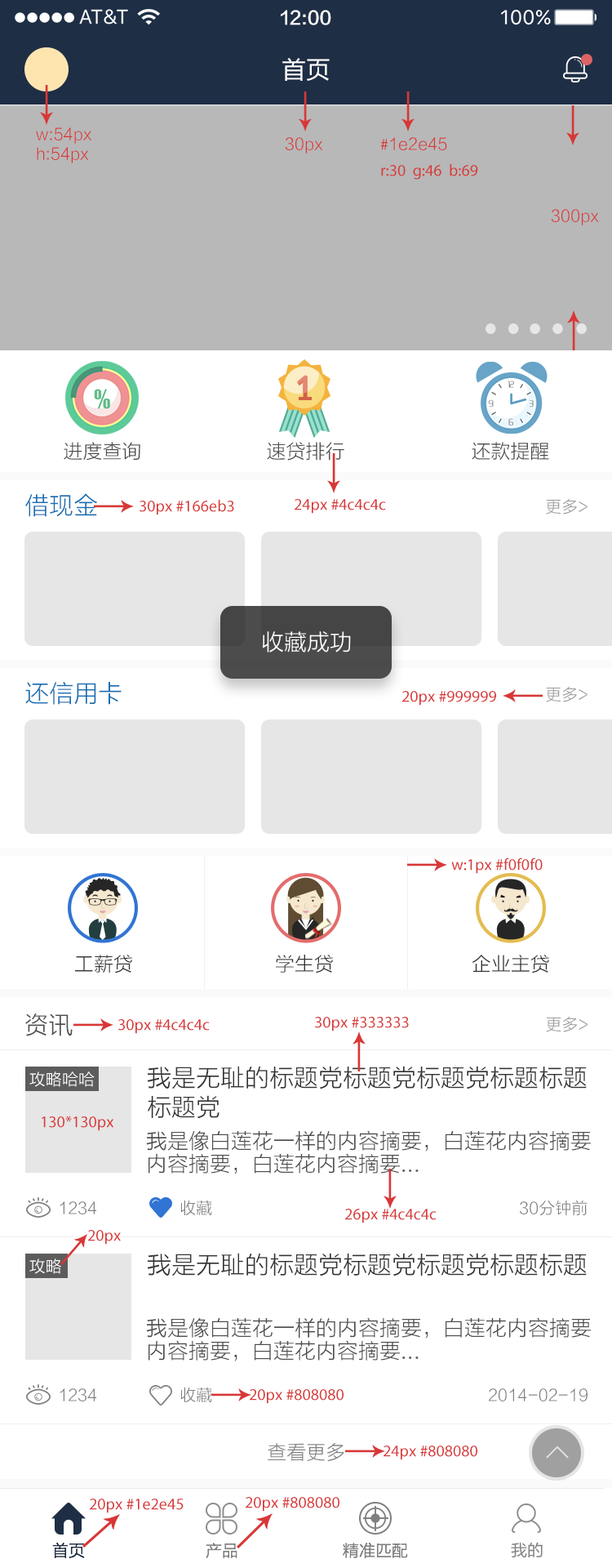
<style>
.page{position:relative;width:612px;height:1568px;background:#ffffff}
.page>*{position:absolute;margin:0}
.t1{font:18px "FZLTZHK--GBK1-0";color:#ffffff}
.t2{font:24.5px "FZLTHJW--GB1-0";color:#ffffff}
.t3{font:16.3px/19.6px "FZLTXHK";color:#d83737}
.t4{font:16.3px "FZLTXHK";color:#d83737}
.t5{font:16.3px "MyriadPro-Regular";color:#d83737}
.t6{font:19.6px "FZLTXHK";color:#4d4d4d}
.t7{font:24.5px "FZLTXHK";color:#166eb3}
.t8{font:16.3px "FZLTXHK";color:#999999}
.t9{font:22.9px "FZLTXHK";color:#ffffff}
.t10{font:19.6px "FZLTXHK";color:#333333}
.t11{font:24.5px "FZLTXHK";color:#4d4d4d}
.t12{font:16.3px "FZLTXHK";color:#ffffff}
.t13{font:24.5px/29.4px "FZLTXHK";color:#333333}
.t14{font:21.2px/22.9px "FZLTXHK";color:#4d4d4d}
.t15{font:16.3px "FZLTXHK";color:#808080}
.t16{font:24.5px "FZLTXHK";color:#333333}
.t17{font:19.6px "FZLTXHK";color:#808080}
.t18{font:16.3px "FZLTXHK";color:#1e2e45}
.t19{font:16.3px "FZLTHK--GBK1-0";color:#808080}
</style>
<div class="page">
<p class="t1" style="left:281px;top:10px;width:51px;height:15px">12:00</p>
<p class="t2" style="left:283px;top:58px;width:47px;height:23px">首页</p>
<p class="t3" style="left:36px;top:127px;width:55px;height:36px">w:54px<br>h:54px</p>
<p class="t4" style="left:285px;top:137px;width:38px;height:17px">30px</p>
<p class="t4" style="left:381px;top:137px;width:67px;height:13px"><span class="t5">#</span>1e2e45</p>
<p class="t5" style="left:381px;top:164px;width:98px;height:16px">r:30  g:46  b:69</p>
<p class="t4" style="left:551px;top:209px;width:48px;height:16px">300px</p>
<p class="t6" style="left:64px;top:442px;width:76px;height:19px">进度查询</p>
<p class="t6" style="left:267px;top:442px;width:78px;height:19px">速贷排行</p>
<p class="t6" style="left:472px;top:442px;width:78px;height:19px">还款提醒</p>
<p class="t7" style="left:25px;top:493px;width:72px;height:24px">借现金</p>
<p class="t5" style="left:140px;top:500px;width:94px;height:15px">30px #166eb3</p>
<p class="t5" style="left:295px;top:499px;width:91px;height:15px">24px #4c4c4c</p>
<p class="t8" style="left:546px;top:499px;width:42px;height:15px">更多&gt;</p>
<p class="t9" style="left:262px;top:631px;width:89px;height:22px">收藏成功</p>
<p class="t7" style="left:25px;top:682px;width:97px;height:23px">还信用卡</p>
<p class="t8" style="left:546px;top:687px;width:42px;height:15px">更多&gt;</p>
<p class="t5" style="left:403px;top:691px;width:94px;height:15px">20px #999999</p>
<p class="t5" style="left:452px;top:858px;width:91px;height:16px">w:1px #f0f0f0</p>
<p class="t10" style="left:75px;top:955px;width:57px;height:18px">工薪贷</p>
<p class="t10" style="left:276px;top:955px;width:57px;height:18px">学生贷</p>
<p class="t10" style="left:473px;top:955px;width:77px;height:18px">企业主贷</p>
<p class="t11" style="left:25px;top:1013px;width:48px;height:23px">资讯</p>
<p class="t5" style="left:118px;top:1019px;width:92px;height:15px">30px #4c4c4c</p>
<p class="t5" style="left:315px;top:1017px;width:94px;height:14px">30px #333333</p>
<p class="t8" style="left:546px;top:1017px;width:42px;height:15px">更多&gt;</p>
<p class="t12" style="left:29px;top:1071px;width:66px;height:16px">攻略哈哈</p>
<p class="t13" style="left:147px;top:1066px;width:440px;height:53px">我是无耻的标题党标题党标题党标题标题<br>标题党</p>
<p class="t5" style="left:42px;top:1116px;width:72px;height:15px">130*130px</p>
<p class="t14" style="left:146px;top:1130px;width:445px;height:44px">我是像白莲花一样的内容摘要，白莲花内容摘要<br>内容摘要，白莲花内容摘要...</p>
<p class="t15" style="left:60px;top:1201px;width:36px;height:13px">1234</p>
<p class="t15" style="left:180px;top:1200px;width:32px;height:16px">收藏</p>
<p class="t15" style="left:520px;top:1200px;width:68px;height:16px">30分钟前</p>
<p class="t5" style="left:345px;top:1209px;width:92px;height:14px">26px #4c4c4c</p>
<p class="t5" style="left:88px;top:1230px;width:33px;height:15px">20px</p>
<p class="t16" style="left:147px;top:1253px;width:440px;height:23px">我是无耻的标题党标题党标题党标题标题</p>
<p class="t12" style="left:29px;top:1258px;width:32px;height:16px">攻略</p>
<p class="t14" style="left:146px;top:1317px;width:445px;height:44px">我是像白莲花一样的内容摘要，白莲花内容摘要<br>内容摘要，白莲花内容摘要...</p>
<p class="t15" style="left:60px;top:1388px;width:36px;height:13px">1234</p>
<p class="t15" style="left:180px;top:1388px;width:32px;height:15px">收藏</p>
<p class="t5" style="left:250px;top:1389px;width:94px;height:15px">20px #808080</p>
<p class="t15" style="left:489px;top:1388px;width:99px;height:13px">2014-02-19</p>
<p class="t17" style="left:268px;top:1443px;width:77px;height:19px">查看更多</p>
<p class="t5" style="left:384px;top:1446px;width:94px;height:14px">24px #808080</p>
<p class="t5" style="left:90px;top:1499px;width:94px;height:14px">20px #1e2e45</p>
<p class="t5" style="left:246px;top:1497px;width:94px;height:15px">20px #808080</p>
<p class="t18" style="left:52px;top:1542px;width:33px;height:16px">首页</p>
<p class="t19" style="left:511px;top:1542px;width:32px;height:16px">我的</p>
<p class="t15" style="left:206px;top:1543px;width:32px;height:15px">产品</p>
<p class="t15" style="left:343px;top:1543px;width:65px;height:15px">精准匹配</p>
</div>
